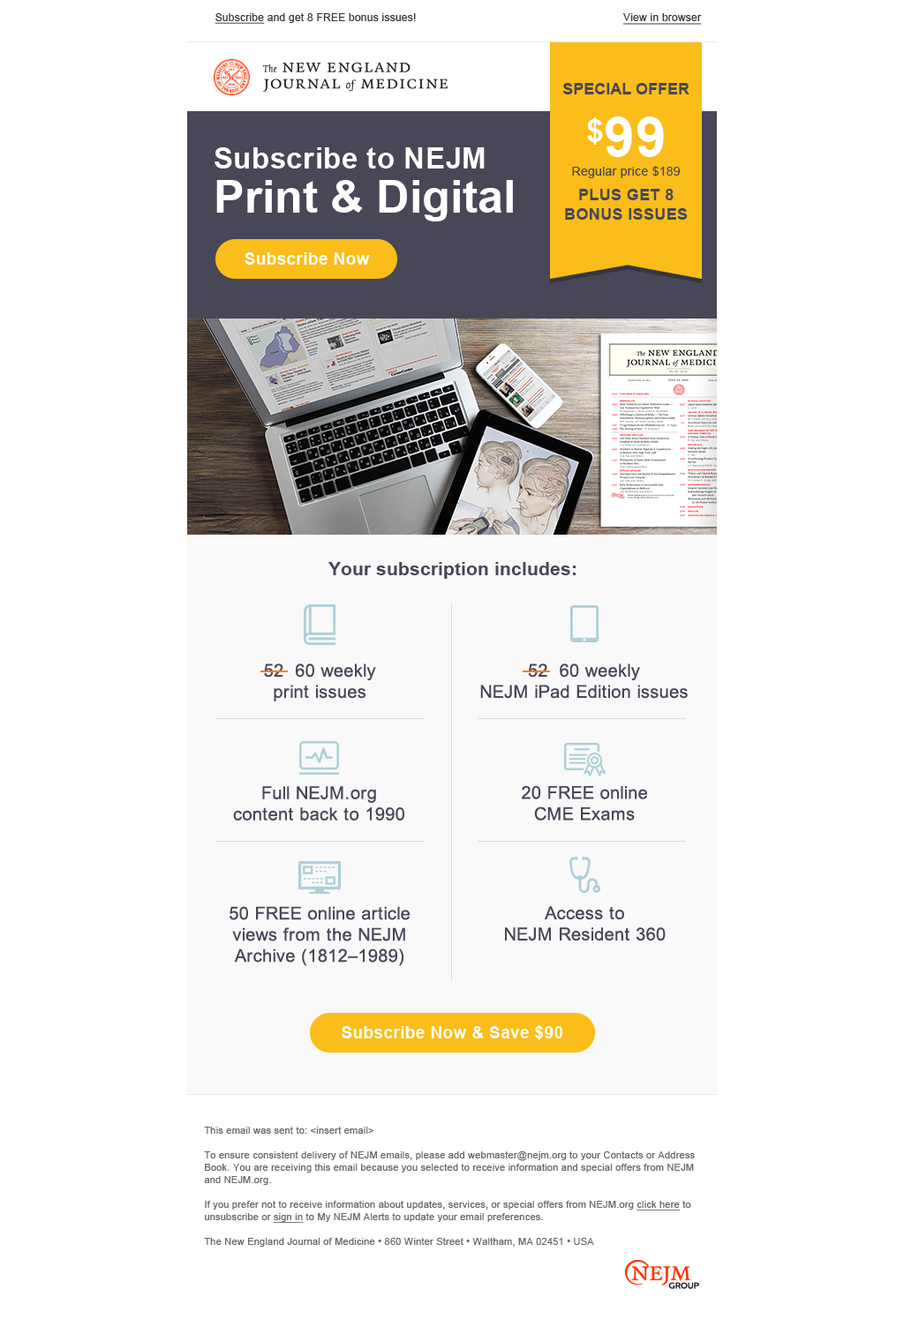
<style>
.page{position:relative;width:904px;height:1319px;background:#ffffff}
.page>*{position:absolute;margin:0}
.t1{font:10.6px "ArialMT";letter-spacing:0.02em;color:#333333}
.t2{font:10.6px "ArialMT";letter-spacing:0.02em;color:#333333;text-decoration:underline}
.t3{font:15.9px/19.4px "Arial-BoldMT";letter-spacing:0.02em;color:#484757;text-transform:uppercase}
.t4{font:15.9px/19.4px "Arial-BoldMT";color:#484757;text-transform:uppercase}
.t5{font:54.7px/56.5px "Arial-BoldMT";letter-spacing:0.02em;color:#ffffff}
.t6{font:12.4px/14.1px "ArialMT";letter-spacing:0.02em;color:#484757}
.t7{font:29.1px/22.9px "Arial-BoldMT";letter-spacing:0.02em;color:#ffffff}
.t8{font:45.9px/37.1px "Arial-BoldMT";color:#ffffff}
.t9{font:16.8px "Arial-BoldMT";letter-spacing:0.02em;color:#ffffff}
.t10{font:18.5px "Arial-BoldMT";color:#484757}
.t11{font:17.7px/21.2px "ArialMT";letter-spacing:0.02em;color:#484757}
.t12{font:9.7px/12.4px "ArialMT";letter-spacing:0.02em;color:#666666}
.t13{font:9.7px/12.4px "ArialMT";letter-spacing:0.02em;color:#666666;text-decoration:underline}
</style>
<div class="page">
<p class="t1" style="left:214px;top:13px;width:202px;height:11px"><span class="t2">Subscribe</span> and get 8 FREE bonus issues!</p>
<p class="t2" style="left:622px;top:13px;width:80px;height:12px">View in browser</p>
<p class="t3" style="left:562px;top:83px;width:127px;height:137px;text-align:center"><span class="t4">Special offer<br></span><span class="t5">$99<br></span><span class="t6">Regular price $189<br></span>Plus get 8 bonus issues</p>
<p class="t7" style="left:214px;top:147px;width:299px;height:75px">Subscribe to NEJM<br><span class="t8">Print &amp; Digital</span></p>
<p class="t9" style="left:244px;top:252px;width:126px;height:13px">Subscribe Now</p>
<p class="t10" style="left:328px;top:562px;width:247px;height:17px">Your subscription includes:</p>
<p class="t11" style="left:264px;top:664px;width:112px;height:38px;text-align:center">52  60 weekly <br>print issues</p>
<p class="t11" style="left:480px;top:664px;width:208px;height:35px;text-align:center">52  60 weekly <br>NEJM iPad Edition issues</p>
<p class="t11" style="left:522px;top:785px;width:125px;height:36px;text-align:center">20 FREE online <br>CME Exams</p>
<p class="t11" style="left:233px;top:786px;width:171px;height:35px;text-align:center">Full NEJM.org <br>content back to 1990</p>
<p class="t11" style="left:229px;top:906px;width:181px;height:60px;text-align:center">50 FREE online article <br>views from the NEJM <br>Archive (1812–1989)</p>
<p class="t11" style="left:505px;top:906px;width:160px;height:36px;text-align:center">Access to <br>NEJM Resident 360</p>
<p class="t9" style="left:342px;top:1026px;width:220px;height:15px">Subscribe Now &amp; Save $90</p>
<p class="t12" style="left:204px;top:1127px;width:491px;height:120px">This email was sent to: &lt;insert email&gt; <br><br>To ensure consistent delivery of NEJM emails, please add webmaster@nejm.org to your Contacts or Address Book. You are receiving this email because you selected to receive information and special offers from NEJM and NEJM.org.<br><br>If you prefer not to receive information about updates, services, or special offers from NEJM.org <span class="t13">click here</span> to <br>unsubscribe or <span class="t13">sign in</span> to My NEJM Alerts to update your email preferences.<br><br>The New England Journal of Medicine • 860 Winter Street • Waltham, MA 02451 • USA</p>
</div>
